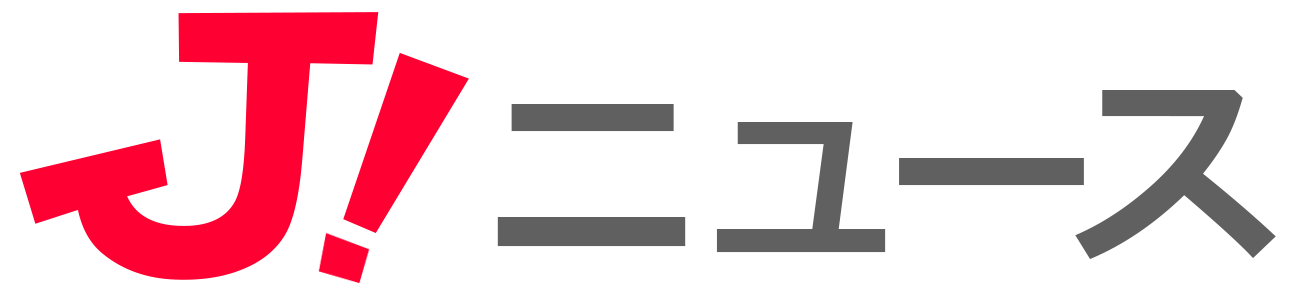
<style>
.page{position:relative;width:1293px;height:305px;background:#ffffff}
.page>*{position:absolute;margin:0}
.t1{font:326px "Yahoo";color:#fe0032}
.t2{font:206px "Meiryo-Bold";letter-spacing:-0.1em;color:#606060}
.t3{font:206px "Meiryo-Bold";letter-spacing:0.04em;color:#606060}
</style>
<div class="page">
<p class="t1" style="left:19px;top:12px;width:360px;height:268px;rotate:2deg">J</p>
<p class="t2" style="left:497px;top:90px;width:779px;height:169px"><span class="t3">ニ</span>ュース</p>
</div>
